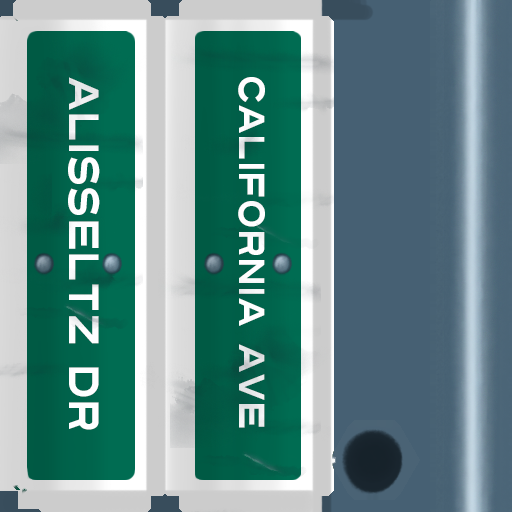
<style>
.page{position:relative;width:512px;height:512px}
.page>*{position:absolute;margin:0}
.t1{font:42px "Turnpike";color:#fefeff;scale:0.75 1}
.t2{font:36px "Turnpike";color:#fefeff;scale:0.75 1}
</style>
<div class="page">
<p class="t1" style="left:68px;top:77px;width:32px;height:353px;rotate:90deg">Alisseltz Dr</p>
<p class="t2" style="left:238px;top:77px;width:27px;height:351px;rotate:90deg">california ave</p>
</div>
